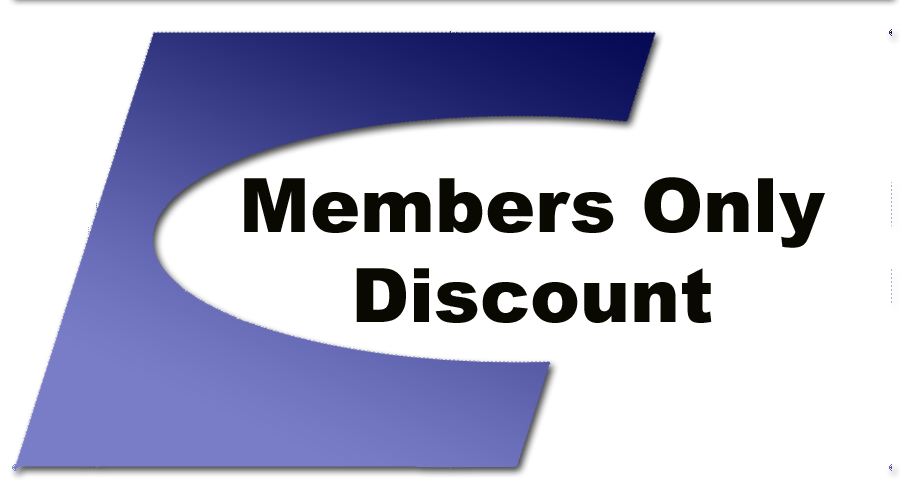
<style>
.page{position:relative;width:900px;height:500px;background:#ffffff}
.page>*{position:absolute;margin:0}
.t1{font:75px "Arial-Black";color:#090902}
</style>
<div class="page">
<p class="t1" style="left:244px;top:177px;width:581px;height:146px;text-align:center">Members Only<br>Discount</p>
</div>
